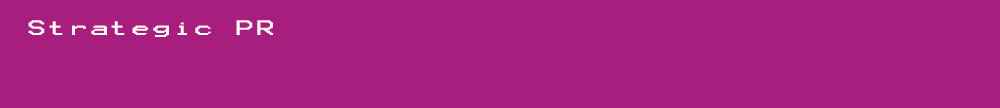
<style>
.page{position:relative;width:1000px;height:108px;background:#a71e7f}
.page>*{position:absolute;margin:0}
.t1{font:16.8px "Terminal";letter-spacing:0.075em;color:#fbf9f4;scale:1.5 1}
</style>
<div class="page">
<p class="t1" style="left:28px;top:20px;width:245px;height:17px">Strategic PR</p>
</div>
